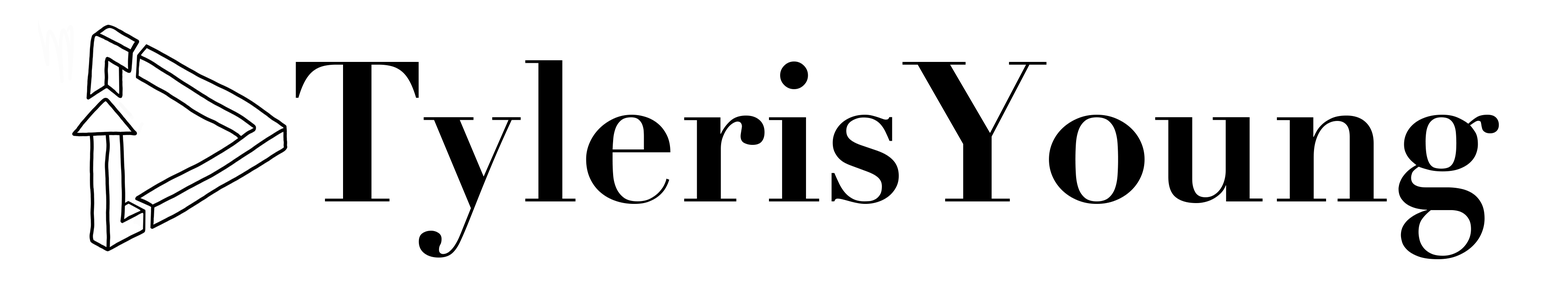
<style>
.page{position:relative;width:1568px;height:305px;background:#ffffff}
.page>*{position:absolute;margin:0}
.t1{font:195.8px "Didot-Bold";letter-spacing:-0.005em;color:#000000}
</style>
<div class="page">
<p class="t1" style="left:296px;top:60px;width:1203px;height:199px">TylerisYoung</p>
</div>
